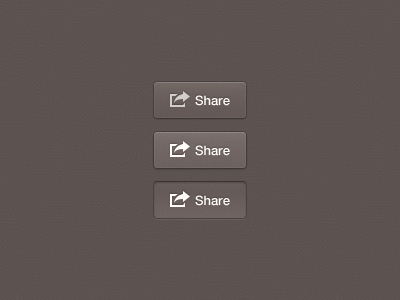
<style>
.page{position:relative;width:400px;height:300px}
.page>*{position:absolute;margin:0}
.t1{font:13px "HelveticaNeue-Medium";color:#fffcfa}
</style>
<div class="page">
<p class="t1" style="left:195px;top:95px;width:35px;height:11px">Share</p>
<p class="t1" style="left:195px;top:145px;width:35px;height:11px">Share</p>
<p class="t1" style="left:195px;top:195px;width:35px;height:11px">Share</p>
</div>
